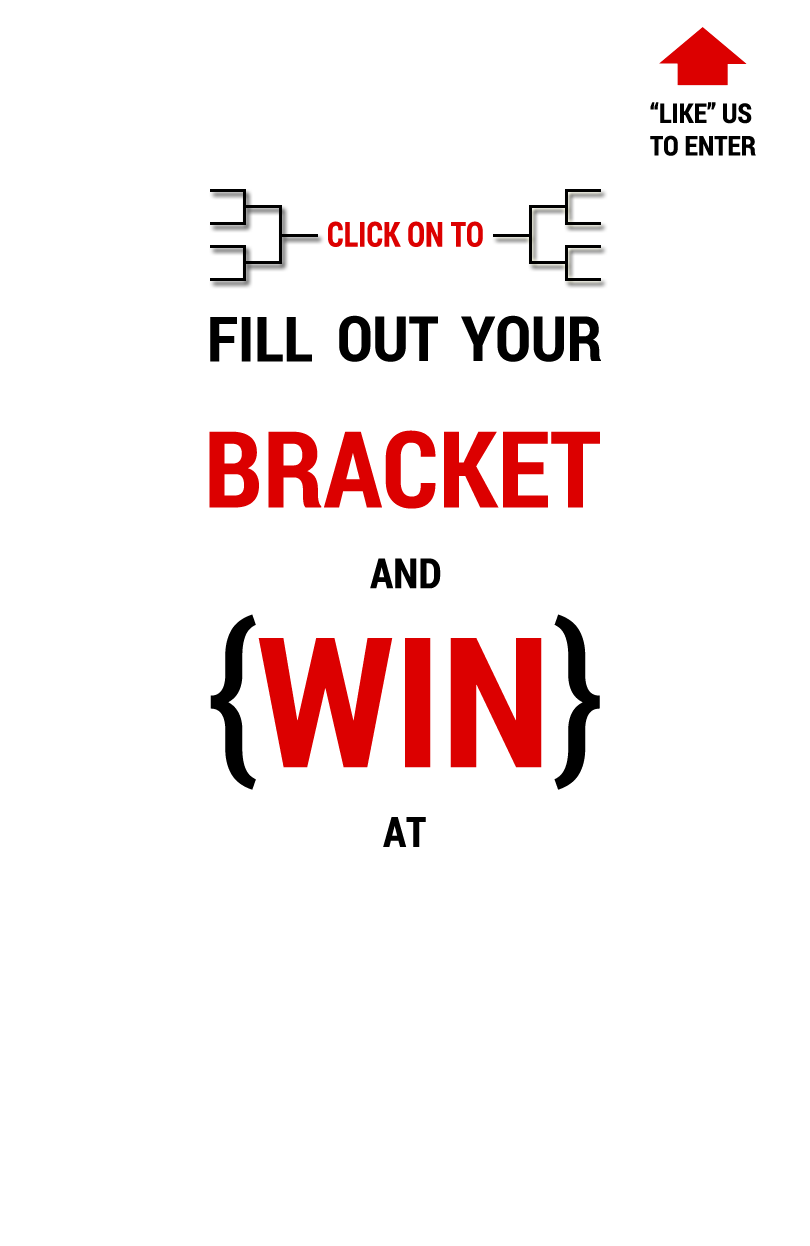
<style>
.page{position:relative;width:810px;height:1246px;background:#ffffff}
.page>*{position:absolute;margin:0}
.t1{font:27.1px "RobotoCondensed-Bold";color:#000000}
.t2{font:34.4px "RobotoCondensed-Bold";color:#dc0000;scale:0.91 1}
.t3{font:62.5px "RobotoCondensed-Bold";color:#000000}
.t4{font:106.2px "RobotoCondensed-Bold";color:#dc0000}
.t5{font:41.7px "RobotoCondensed-Bold";color:#000000}
.t6{font:181.2px "RobotoCondensed-Regular";color:#000000}
.t7{font:181.2px "RobotoCondensed-Bold";color:#dc0000}
</style>
<div class="page">
<p class="t1" style="left:650px;top:102px;width:106px;height:54px">“LIKE” US<br>TO ENTER</p>
<p class="t2" style="left:328px;top:221px;width:155px;height:26px">CLICK ON TO</p>
<p class="t3" style="left:210px;top:317px;width:102px;height:45px">FILL</p>
<p class="t3" style="left:339px;top:315px;width:99px;height:47px">OUT</p>
<p class="t3" style="left:461px;top:315px;width:140px;height:47px">YOUR</p>
<p class="t4" style="left:209px;top:430px;width:391px;height:79px">BRACKET</p>
<p class="t5" style="left:370px;top:558px;width:71px;height:31px">AND</p>
<p class="t6" style="left:210px;top:614px;width:46px;height:176px">{</p>
<p class="t6" style="left:554px;top:614px;width:46px;height:176px">}</p>
<p class="t7" style="left:258px;top:638px;width:284px;height:130px">WIN</p>
<p class="t5" style="left:383px;top:817px;width:43px;height:30px">AT</p>
</div>
